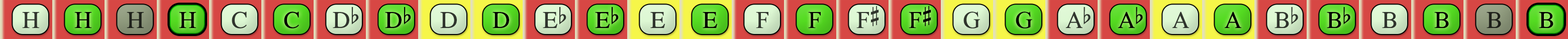
<style>
.page{position:relative;width:1568px;height:39px}
.page>*{position:absolute;margin:0}
.t1{font:24.1px "OpusChords";color:#30352d}
.t2{font:24.1px "OpusChords";color:#000000}
.t3{font:24.1px "OpusChords";color:#1f211b}
.t4{font:24.1px "OpusChords";color:#30362e}
.t5{font:24.1px "OpusChords";color:#2f352d}
.t6{font:24.1px "OpusChords";letter-spacing:-0.05em;color:#2f352d}
.t7{font:24.1px "OpusChords";letter-spacing:-0.05em;color:#000000}
</style>
<div class="page">
<p class="t1" style="left:22px;top:12px;width:17px;height:16px">H</p>
<p class="t2" style="left:74px;top:12px;width:17px;height:16px">H</p>
<p class="t3" style="left:127px;top:12px;width:17px;height:16px">H</p>
<p class="t2" style="left:179px;top:12px;width:17px;height:16px">H</p>
<p class="t4" style="left:232px;top:12px;width:15px;height:17px">C</p>
<p class="t2" style="left:284px;top:12px;width:15px;height:17px">C</p>
<p class="t5" style="left:333px;top:7px;width:26px;height:21px">Db</p>
<p class="t2" style="left:385px;top:7px;width:26px;height:21px">Db</p>
<p class="t5" style="left:440px;top:12px;width:17px;height:16px">D</p>
<p class="t2" style="left:493px;top:12px;width:16px;height:16px">D</p>
<p class="t1" style="left:543px;top:7px;width:23px;height:21px">Eb</p>
<p class="t2" style="left:595px;top:7px;width:24px;height:21px">Eb</p>
<p class="t4" style="left:650px;top:12px;width:15px;height:16px">E</p>
<p class="t2" style="left:703px;top:12px;width:14px;height:16px">E</p>
<p class="t4" style="left:756px;top:12px;width:12px;height:16px">F</p>
<p class="t2" style="left:808px;top:12px;width:13px;height:16px">F</p>
<p class="t1" style="left:856px;top:6px;width:23px;height:22px">F#</p>
<p class="t2" style="left:909px;top:6px;width:22px;height:22px">F#</p>
<p class="t5" style="left:963px;top:12px;width:17px;height:17px">G</p>
<p class="t2" style="left:1016px;top:12px;width:16px;height:17px">G</p>
<p class="t6" style="left:1065px;top:7px;width:26px;height:21px">Ab</p>
<p class="t7" style="left:1118px;top:7px;width:25px;height:21px">Ab</p>
<p class="t5" style="left:1172px;top:12px;width:17px;height:16px">A</p>
<p class="t2" style="left:1224px;top:12px;width:17px;height:16px">A</p>
<p class="t1" style="left:1275px;top:7px;width:23px;height:21px">Bb</p>
<p class="t2" style="left:1327px;top:7px;width:23px;height:21px">Bb</p>
<p class="t1" style="left:1382px;top:12px;width:15px;height:16px">B</p>
<p class="t2" style="left:1434px;top:12px;width:15px;height:16px">B</p>
<p class="t3" style="left:1487px;top:12px;width:14px;height:16px">B</p>
<p class="t2" style="left:1539px;top:12px;width:14px;height:16px">B</p>
</div>
